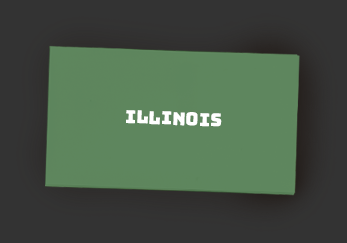
<style>
.page{position:relative;width:347px;height:243px;background:#333333}
.page>*{position:absolute;margin:0}
.t1{font:18px "Bungee-Regular";color:#ffffff}
</style>
<div class="page">
<p class="t1" style="left:126px;top:110px;width:96px;height:17px;rotate:2deg">illinois</p>
</div>
